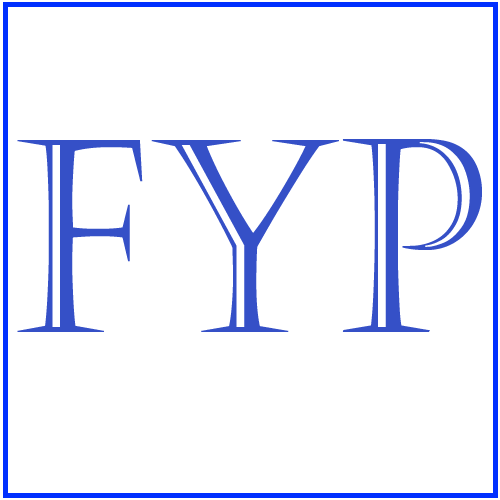
<style>
.page{position:relative;width:500px;height:500px;background:#ffffff}
.page>*{position:absolute;margin:0}
.t1{font:269px "Castellar";color:#3550c7;scale:0.87 1}
</style>
<div class="page">
<p class="t1" style="left:17px;top:139px;width:465px;height:193px">FYP</p>
</div>
